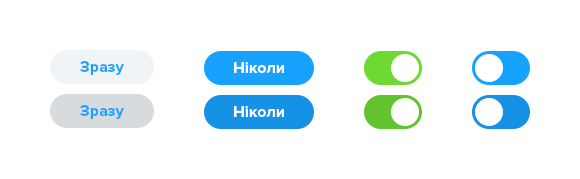
<style>
.page{position:relative;width:580px;height:179px;background:#ffffff}
.page>*{position:absolute;margin:0}
.t1{font:16px "ProximaNova-Bold";color:#17a2ff}
.t2{font:16px "ProximaNova-Bold";color:#ffffff}
</style>
<div class="page">
<p class="t1" style="left:80px;top:61px;width:44px;height:14px">Зразу</p>
<p class="t2" style="left:234px;top:62px;width:50px;height:11px">Ніколи</p>
<p class="t1" style="left:80px;top:105px;width:44px;height:14px">Зразу</p>
<p class="t2" style="left:234px;top:106px;width:50px;height:11px">Ніколи</p>
</div>
